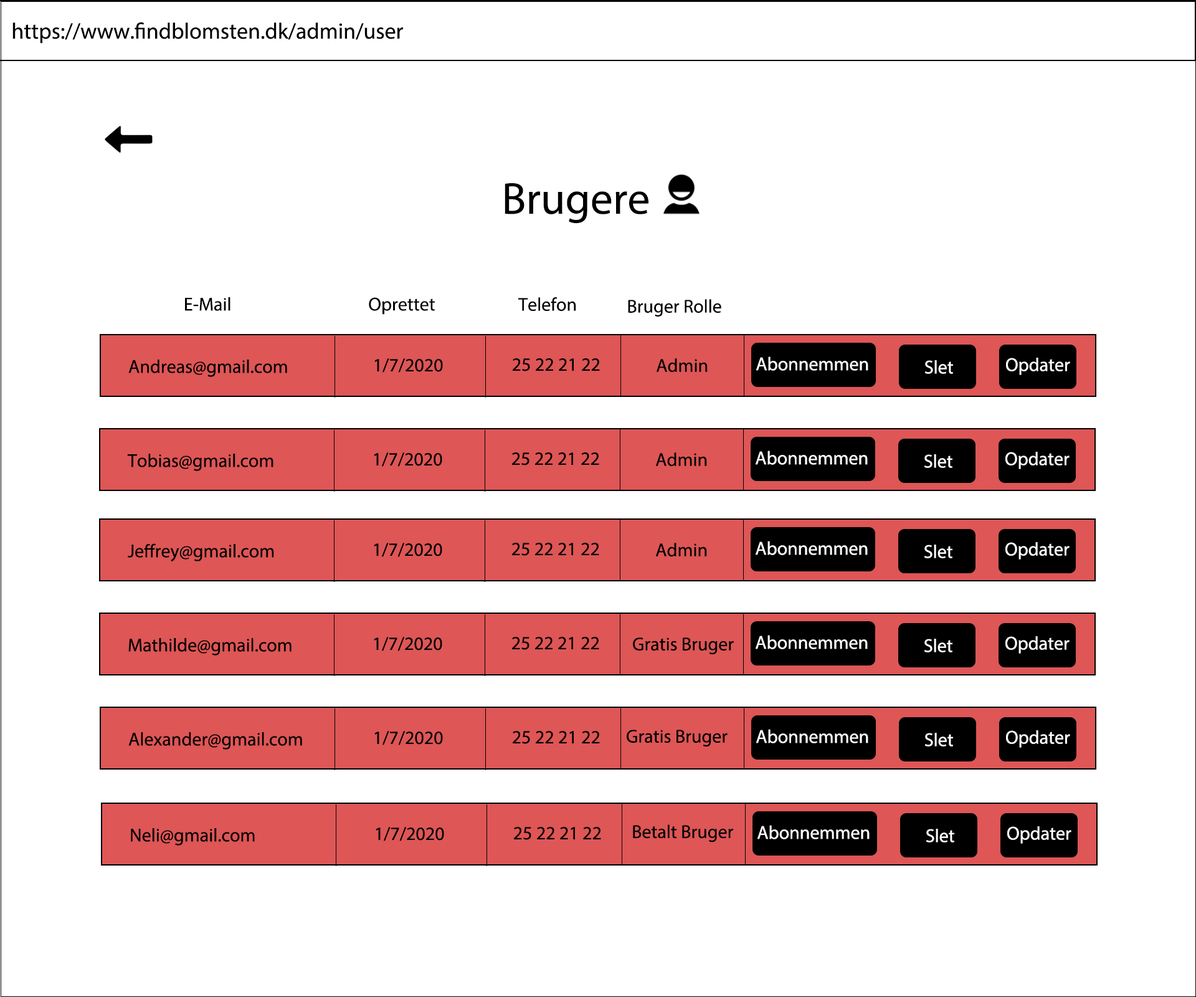
<style>
.page{position:relative;width:1196px;height:997px;background:#ffffff}
.page>*{position:absolute;margin:0}
.t1{font:22.4px "MyriadPro-Regular";color:#000000}
.t2{font:44.9px "MyriadPro-Regular";color:#000000}
.t3{font:18.7px "MyriadPro-Regular";color:#000000}
.t4{font:18.7px "MyriadPro-Regular";color:#ffffff}
</style>
<div class="page">
<p class="t1" style="left:12px;top:22px;width:391px;height:22px">https://www.findblomsten.dk/admin/user</p>
<p class="t2" style="left:505px;top:183px;width:144px;height:41px">Brugere</p>
<p class="t3" style="left:185px;top:297px;width:46px;height:14px">E-Mail</p>
<p class="t3" style="left:369px;top:297px;width:66px;height:18px">Oprettet</p>
<p class="t3" style="left:518px;top:297px;width:58px;height:15px">Telefon</p>
<p class="t3" style="left:628px;top:299px;width:93px;height:17px">Bruger Rolle</p>
<p class="t3" style="left:128px;top:359px;width:159px;height:18px">Andreas@gmail.com</p>
<p class="t3" style="left:374px;top:358px;width:69px;height:15px">1/7/2020</p>
<p class="t3" style="left:513px;top:358px;width:87px;height:13px">25 22 21 22</p>
<p class="t3" style="left:656px;top:358px;width:52px;height:15px">Admin</p>
<p class="t4" style="left:756px;top:356px;width:112px;height:15px">Abonnemment</p>
<p class="t4" style="left:925px;top:360px;width:28px;height:14px">Slet</p>
<p class="t4" style="left:1006px;top:358px;width:64px;height:17px">Opdater</p>
<p class="t3" style="left:127px;top:454px;width:147px;height:17px">Tobias@gmail.com</p>
<p class="t3" style="left:374px;top:452px;width:68px;height:15px">1/7/2020</p>
<p class="t3" style="left:512px;top:452px;width:87px;height:13px">25 22 21 22</p>
<p class="t3" style="left:655px;top:452px;width:52px;height:15px">Admin</p>
<p class="t4" style="left:756px;top:450px;width:112px;height:15px">Abonnemment</p>
<p class="t4" style="left:925px;top:454px;width:28px;height:14px">Slet</p>
<p class="t4" style="left:1006px;top:452px;width:64px;height:17px">Opdater</p>
<p class="t3" style="left:128px;top:543px;width:146px;height:18px">Jeffrey@gmail.com</p>
<p class="t3" style="left:374px;top:543px;width:68px;height:14px">1/7/2020</p>
<p class="t3" style="left:512px;top:543px;width:87px;height:13px">25 22 21 22</p>
<p class="t3" style="left:655px;top:543px;width:52px;height:14px">Admin</p>
<p class="t4" style="left:756px;top:541px;width:112px;height:14px">Abonnemment</p>
<p class="t4" style="left:925px;top:545px;width:28px;height:13px">Slet</p>
<p class="t4" style="left:1006px;top:542px;width:64px;height:17px">Opdater</p>
<p class="t3" style="left:128px;top:638px;width:164px;height:17px">Mathilde@gmail.com</p>
<p class="t3" style="left:374px;top:637px;width:68px;height:14px">1/7/2020</p>
<p class="t3" style="left:512px;top:637px;width:87px;height:13px">25 22 21 22</p>
<p class="t3" style="left:633px;top:637px;width:101px;height:17px">Gratis Bruger</p>
<p class="t4" style="left:756px;top:635px;width:112px;height:14px">Abonnemment</p>
<p class="t4" style="left:925px;top:639px;width:28px;height:13px">Slet</p>
<p class="t4" style="left:1006px;top:636px;width:64px;height:18px">Opdater</p>
<p class="t3" style="left:128px;top:732px;width:174px;height:18px">Alexander@gmail.com</p>
<p class="t3" style="left:374px;top:731px;width:69px;height:14px">1/7/2020</p>
<p class="t3" style="left:513px;top:731px;width:87px;height:13px">25 22 21 22</p>
<p class="t3" style="left:627px;top:730px;width:101px;height:16px">Gratis Bruger</p>
<p class="t4" style="left:756px;top:729px;width:112px;height:14px">Abonnemment</p>
<p class="t4" style="left:925px;top:733px;width:28px;height:13px">Slet</p>
<p class="t4" style="left:1006px;top:730px;width:64px;height:18px">Opdater</p>
<p class="t3" style="left:131px;top:828px;width:124px;height:17px">Neli@gmail.com</p>
<p class="t3" style="left:376px;top:827px;width:68px;height:14px">1/7/2020</p>
<p class="t3" style="left:514px;top:827px;width:87px;height:13px">25 22 21 22</p>
<p class="t3" style="left:633px;top:824px;width:100px;height:18px">Betalt Bruger</p>
<p class="t4" style="left:758px;top:825px;width:112px;height:14px">Abonnemment</p>
<p class="t4" style="left:926px;top:829px;width:28px;height:13px">Slet</p>
<p class="t4" style="left:1007px;top:826px;width:65px;height:18px">Opdater</p>
</div>
